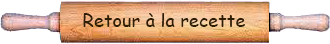
<style>
.page{position:relative;width:330px;height:44px;background:#ffffff}
.page>*{position:absolute;margin:0}
.t1{font:18px "ComicSansMS";letter-spacing:0.005em;color:#2f1d04}
</style>
<div class="page">
<p class="t1" style="left:83px;top:13px;width:162px;height:14px">Retour à la recette</p>
</div>
